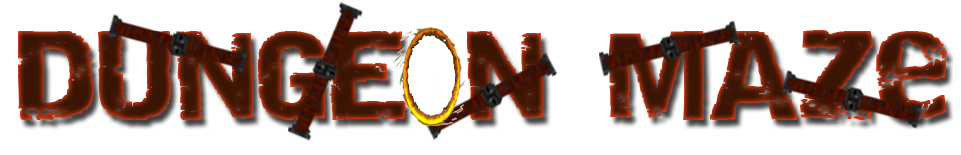
<style>
.page{position:relative;width:961px;height:155px;background:#ffffff}
.page>*{position:absolute;margin:0}
.t1{font:87.5px "Destroy";letter-spacing:-0.02em;font-weight:bold}
</style>
<div class="page">
<p class="t1" style="left:18px;top:30px;width:929px;height:90px">DUNGE N MAze</p>
</div>
